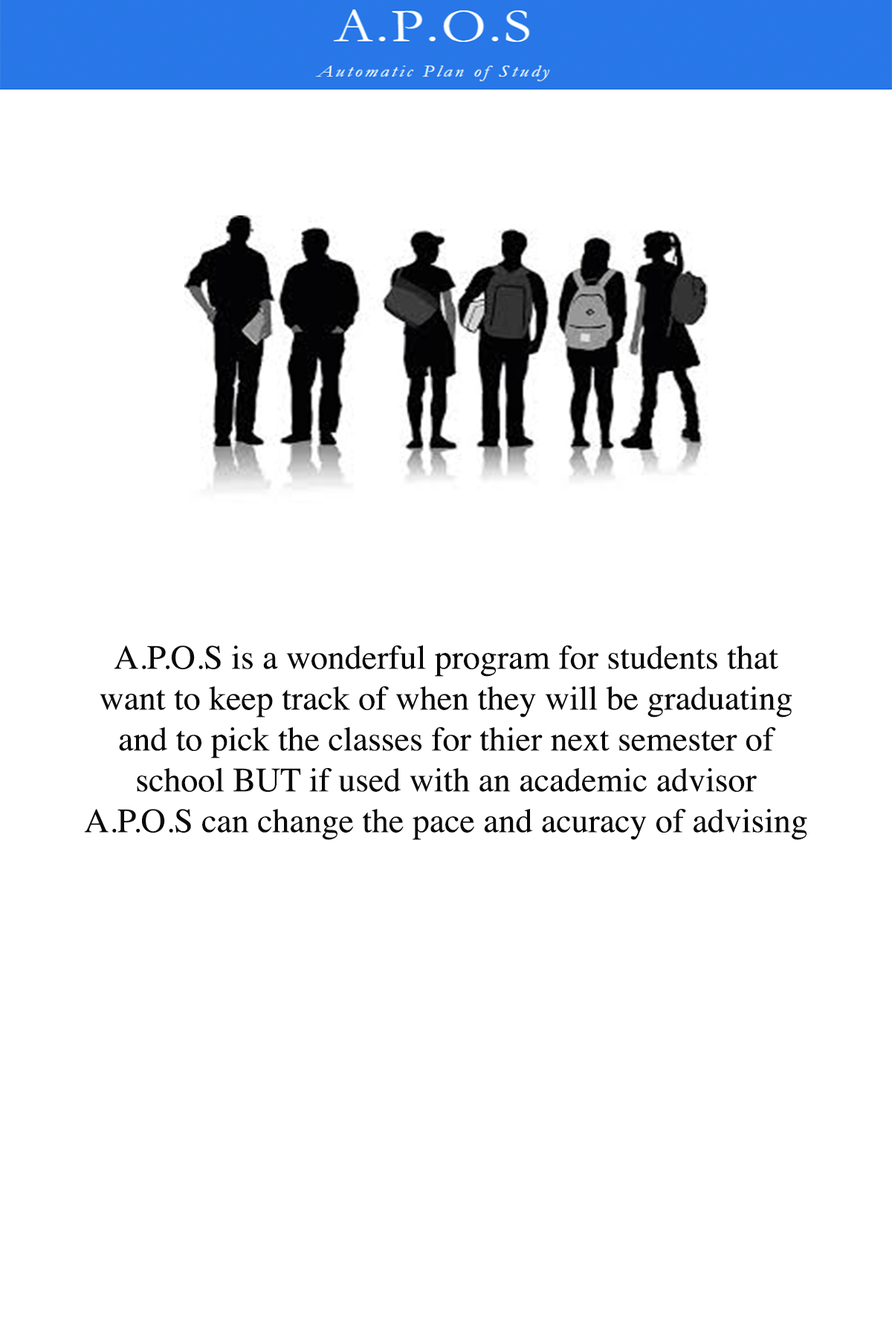
<style>
.page{position:relative;width:892px;height:1337px;background:#ffffff}
.page>*{position:absolute;margin:0}
.t1{font:34.1px "Times-Roman";color:#0a0a0a}
</style>
<div class="page">
<p class="t1" style="left:84px;top:645px;width:723px;height:195px;text-align:center">A.P.O.S is a wonderful program for students that want to keep track of when they will be graduating and to pick the classes for thier next semester of school BUT if used with an academic advisor A.P.O.S can change the pace and acuracy of advising</p>
</div>
